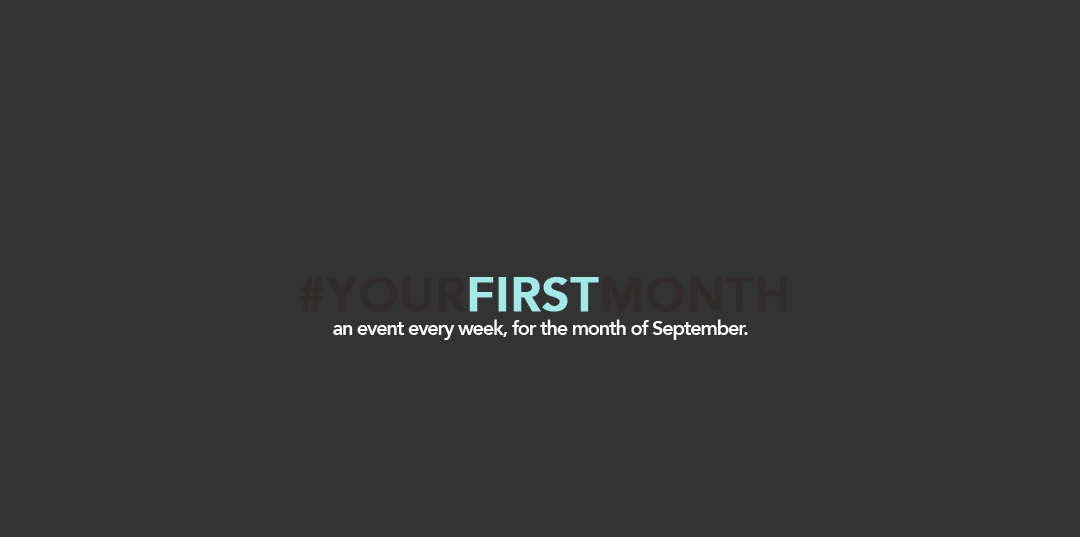
<style>
.page{position:relative;width:1080px;height:537px;background:#333333}
.page>*{position:absolute;margin:0}
.t1{font:47.8px "Avenir-Heavy";letter-spacing:0.001em;color:#322b2b;text-transform:uppercase;font-weight:bold}
.t2{font:47.8px "Avenir-Heavy";letter-spacing:0.001em;color:#a2e9e8;text-transform:uppercase;font-weight:bold}
.t3{font:19.9px "Avenir-Heavy";letter-spacing:-0.059em;color:#ffffff}
</style>
<div class="page">
<p class="t1" style="left:299px;top:277px;width:489px;height:35px">#your<span class="t2">first</span>month</p>
<p class="t3" style="left:333px;top:319px;width:415px;height:21px">an event every week, for the month of September.</p>
</div>
